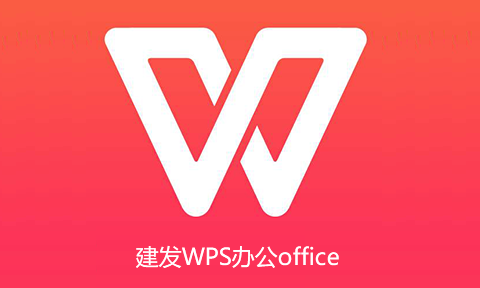
<style>
.page{position:relative;width:480px;height:288px}
.page>*{position:absolute;margin:0}
.t1{font:23px "MicrosoftYaHei";color:#ffffff}
</style>
<div class="page">
<p class="t1" style="left:136px;top:245px;width:203px;height:23px">建发WPS办公office</p>
</div>
